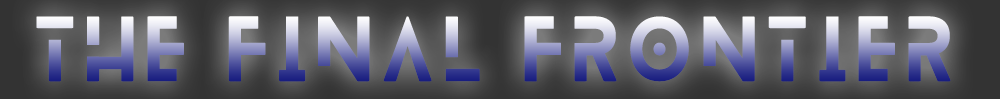
<style>
.page{position:relative;width:1000px;height:99px}
.page>*{position:absolute;margin:0}
.t1{font:80.2px "Blanka-Regular";letter-spacing:0.14em;font-weight:bold;scale:0.93 1}
</style>
<div class="page">
<p class="t1" style="left:36px;top:16px;width:915px;height:66px">THE FINAL FRONTIER</p>
</div>
